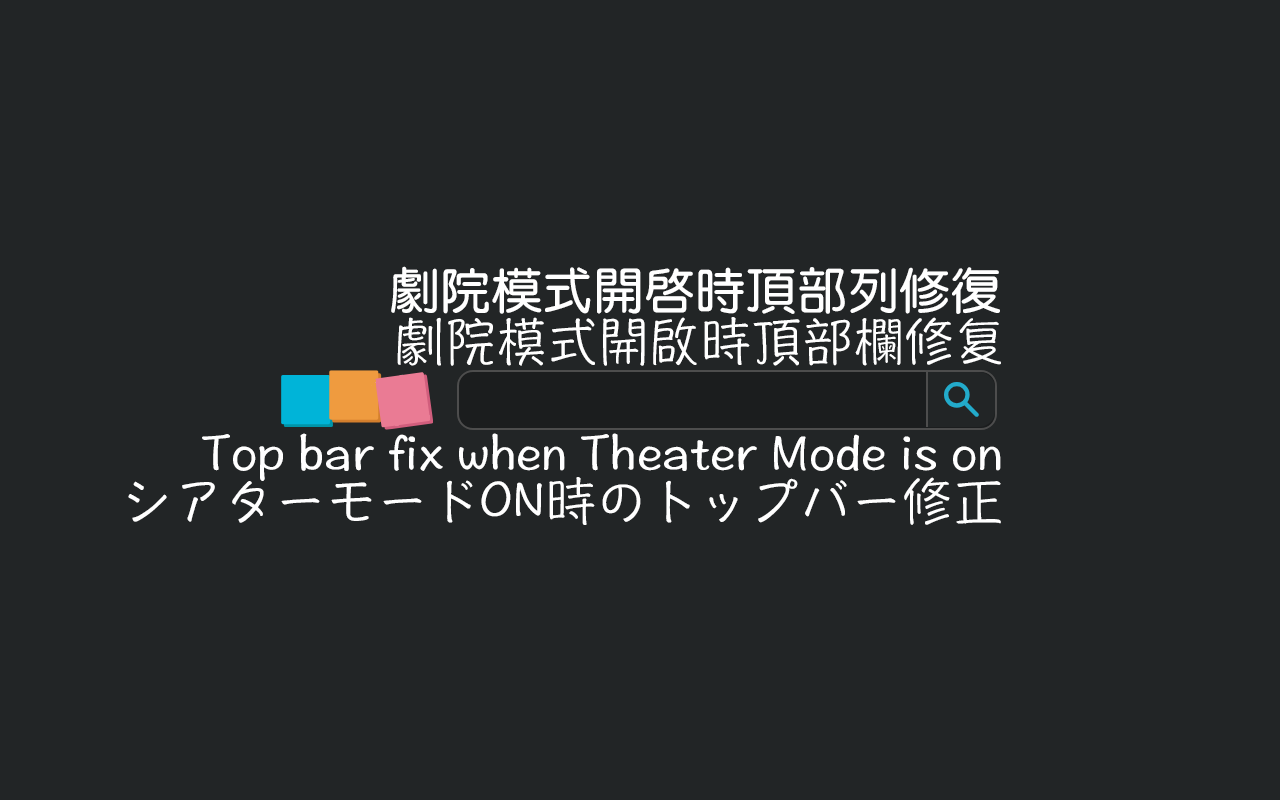
<style>
.page{position:relative;width:1280px;height:800px;background:#222526}
.page>*{position:absolute;margin:0}
.t1{font:51px "©M¥­²Ê¶ê";color:#ffffff}
.t2{font:51px "DFPHannotateW5-B5-TW";color:#ffffff}
</style>
<div class="page">
<p class="t1" style="left:391px;top:266px;width:609px;height:48px">劇院模式開啟時頂部列修復</p>
<p class="t2" style="left:397px;top:317px;width:604px;height:49px">剧院模式开启时顶部栏修复</p>
<p class="t2" style="left:202px;top:433px;width:799px;height:48px">Top bar fix when Theater Mode is on</p>
<p class="t2" style="left:128px;top:477px;width:873px;height:48px">シアターモードON時のトップバー修正</p>
</div>
